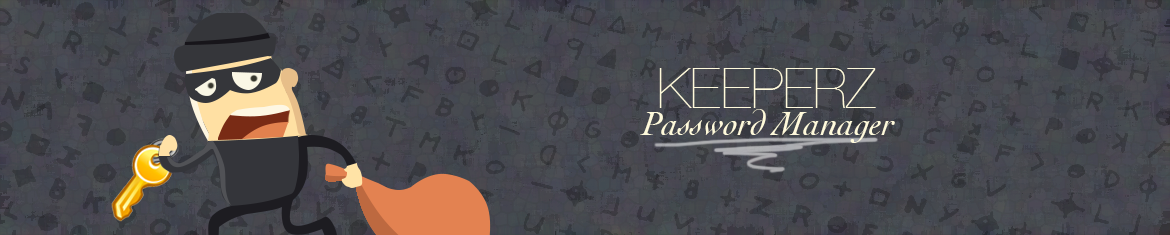
<style>
.page{position:relative;width:1170px;height:235px}
.page>*{position:absolute;margin:0}
.t1{font:56px "HelveticaNeue-UltraLight";color:#fffadc}
.t2{font:36px "Cochin-Italic";color:#fffadc}
</style>
<div class="page">
<p class="t1" style="left:659px;top:68px;width:217px;height:40px">KEEPERZ</p>
<p class="t2" style="left:640px;top:109px;width:255px;height:34px">Password Manager</p>
</div>
